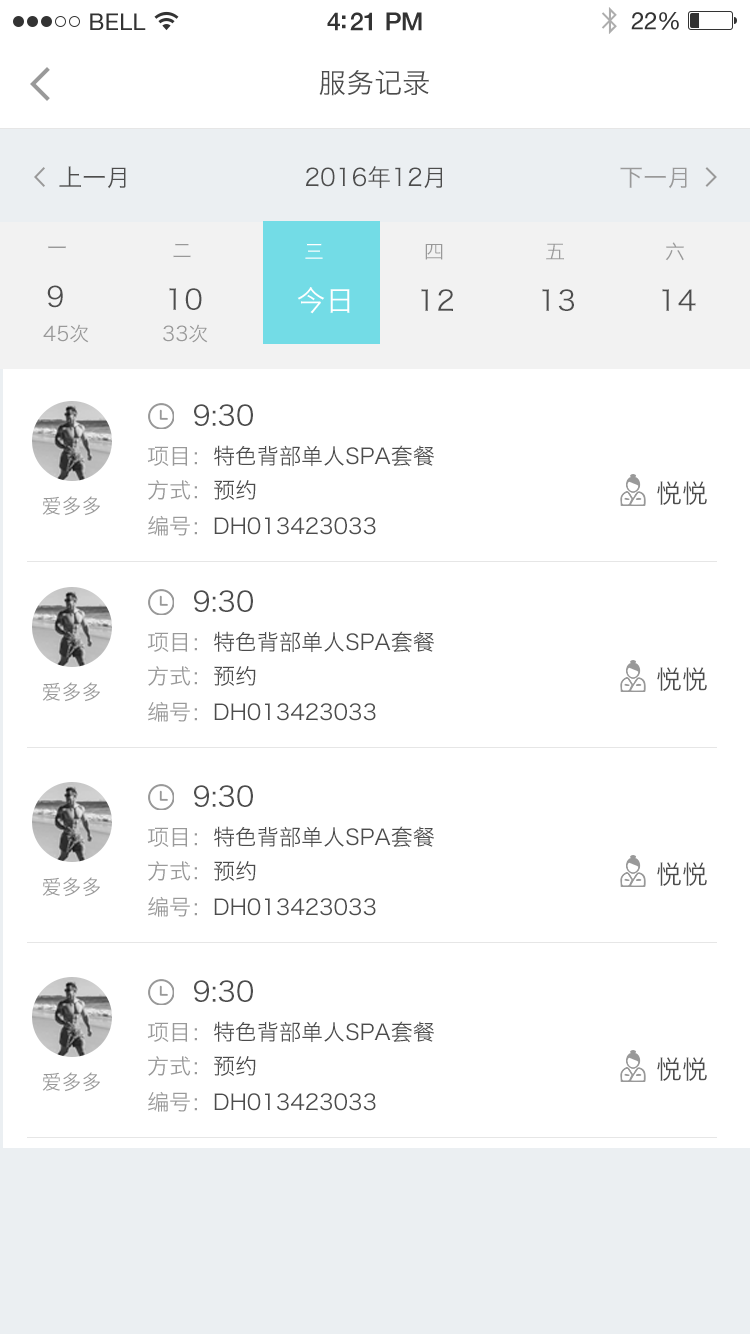
<style>
.page{position:relative;width:750px;height:1334px;background:#ffffff}
.page>*{position:absolute;margin:0}
.t1{font:28px "HiraginoSansGB-W3";color:#4d4d4d}
.t2{font:24px "HiraginoSansGB-W3";color:#4d4d4d}
.t3{font:24px "HiraginoSansGB-W3";color:#999999}
.t4{font:20px "HiraginoSansGB-W3";letter-spacing:0.03em;color:#999999}
.t5{font:20px "HiraginoSansGB-W3";letter-spacing:0.03em;color:#ffffff}
.t6{font:28px "HiraginoSansGB-W3";letter-spacing:0.03em;color:#4d4d4d}
.t7{font:28px "HiraginoSansGB-W3";letter-spacing:0.03em;color:#ffffff}
.t8{font:20px "HiraginoSansGB-W3";color:#999999}
.t9{font:22px "HiraginoSansGB-W3";color:#4c4c4c}
.t10{font:22px/34px "HiraginoSansGB-W3";color:#999999}
.t11{font:22px/34px "HiraginoSansGB-W3";color:#4c4c4c}
.t12{font:22px/36px "HiraginoSansGB-W3";color:#999999}
.t13{font:22px/36px "HiraginoSansGB-W3";color:#4c4c4c}
.t14{font:26px "HiraginoSansGB-W3";color:#4c4c4c}
.t15{font:22px "HiraginoSansGB-W3";color:#999999}
</style>
<div class="page">
<p class="t1" style="left:319px;top:70px;width:110px;height:26px">服务记录</p>
<p class="t2" style="left:59px;top:166px;width:67px;height:23px">上一月</p>
<p class="t2" style="left:305px;top:166px;width:137px;height:23px">2016年12月</p>
<p class="t3" style="left:620px;top:167px;width:67px;height:22px">下一月</p>
<p class="t4" style="left:48px;top:246px;width:18px;height:3px">一</p>
<p class="t4" style="left:173px;top:243px;width:18px;height:15px">二</p>
<p class="t5" style="left:305px;top:243px;width:18px;height:16px">三</p>
<p class="t4" style="left:425px;top:244px;width:18px;height:16px">四</p>
<p class="t4" style="left:546px;top:243px;width:18px;height:17px">五</p>
<p class="t4" style="left:665px;top:242px;width:19px;height:19px">六</p>
<p class="t6" style="left:47px;top:285px;width:16px;height:23px">9</p>
<p class="t6" style="left:169px;top:288px;width:33px;height:22px">10</p>
<p class="t7" style="left:297px;top:287px;width:53px;height:27px">今日</p>
<p class="t6" style="left:421px;top:289px;width:32px;height:22px">12</p>
<p class="t6" style="left:542px;top:289px;width:32px;height:22px">13</p>
<p class="t6" style="left:662px;top:289px;width:34px;height:22px">14</p>
<p class="t8" style="left:43px;top:324px;width:46px;height:19px">45次</p>
<p class="t8" style="left:163px;top:324px;width:45px;height:19px">33次</p>
<p class="t1" style="left:194px;top:404px;width:59px;height:22px">9:30</p>
<p class="t9" style="left:147px;top:445px;width:287px;height:91px;text-align:justify"><span class="t10">项目：</span>特色背部单人SPA套餐<br><span class="t10">方式：</span><span class="t11">预约<br></span><span class="t12">编号：</span><span class="t13">DH013423033</span></p>
<p class="t14" style="left:657px;top:481px;width:50px;height:24px"><span class="t15"><br></span>悦悦</p>
<p class="t8" style="left:42px;top:496px;width:58px;height:20px">爱多多</p>
<p class="t1" style="left:194px;top:590px;width:59px;height:22px">9:30</p>
<p class="t9" style="left:147px;top:631px;width:287px;height:91px;text-align:justify"><span class="t10">项目：</span>特色背部单人SPA套餐<br><span class="t10">方式：</span><span class="t11">预约<br></span><span class="t12">编号：</span><span class="t13">DH013423033</span></p>
<p class="t14" style="left:657px;top:667px;width:50px;height:24px"><span class="t15"><br></span>悦悦</p>
<p class="t8" style="left:42px;top:682px;width:58px;height:20px">爱多多</p>
<p class="t1" style="left:194px;top:785px;width:59px;height:22px">9:30</p>
<p class="t9" style="left:147px;top:826px;width:287px;height:91px;text-align:justify"><span class="t10">项目：</span>特色背部单人SPA套餐<br><span class="t10">方式：</span><span class="t11">预约<br></span><span class="t12">编号：</span><span class="t13">DH013423033</span></p>
<p class="t14" style="left:657px;top:862px;width:50px;height:24px"><span class="t15"><br></span>悦悦</p>
<p class="t8" style="left:42px;top:877px;width:58px;height:20px">爱多多</p>
<p class="t1" style="left:194px;top:980px;width:59px;height:22px">9:30</p>
<p class="t9" style="left:147px;top:1021px;width:287px;height:91px;text-align:justify"><span class="t10">项目：</span>特色背部单人SPA套餐<br><span class="t10">方式：</span><span class="t11">预约<br></span><span class="t12">编号：</span><span class="t13">DH013423033</span></p>
<p class="t14" style="left:657px;top:1057px;width:50px;height:24px"><span class="t15"><br></span>悦悦</p>
<p class="t8" style="left:42px;top:1072px;width:58px;height:20px">爱多多</p>
</div>
